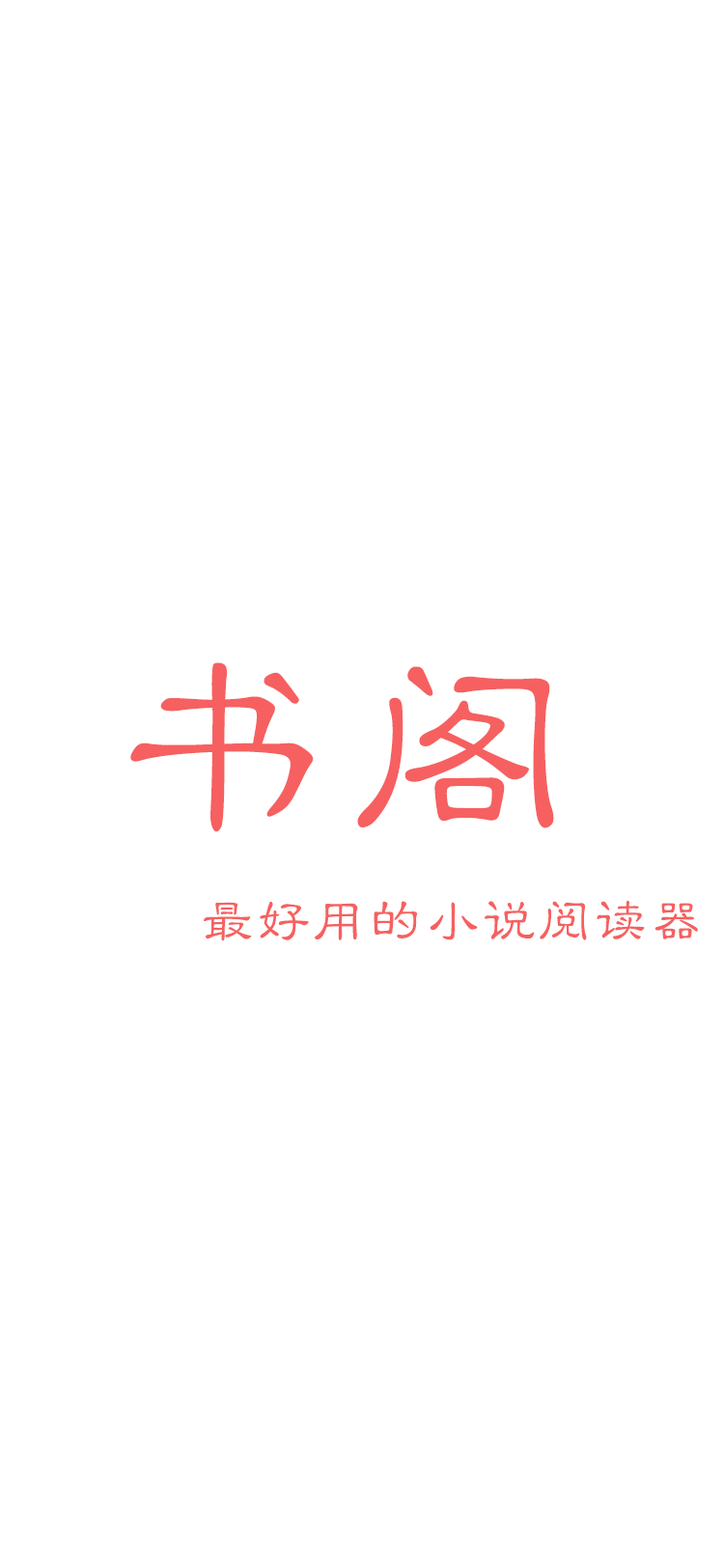
<style>
.page{position:relative;width:724px;height:1568px;background:#ffffff}
.page>*{position:absolute;margin:0}
.t1{font:241.4px "STLibianTC-Regular";color:#f66060}
.t2{font:56.3px "STLibianTC-Regular";color:#f66060}
</style>
<div class="page">
<p class="t1" style="left:130px;top:662px;width:424px;height:170px">书阁</p>
<p class="t2" style="left:204px;top:900px;width:494px;height:41px">最好用的小说阅读器</p>
</div>
